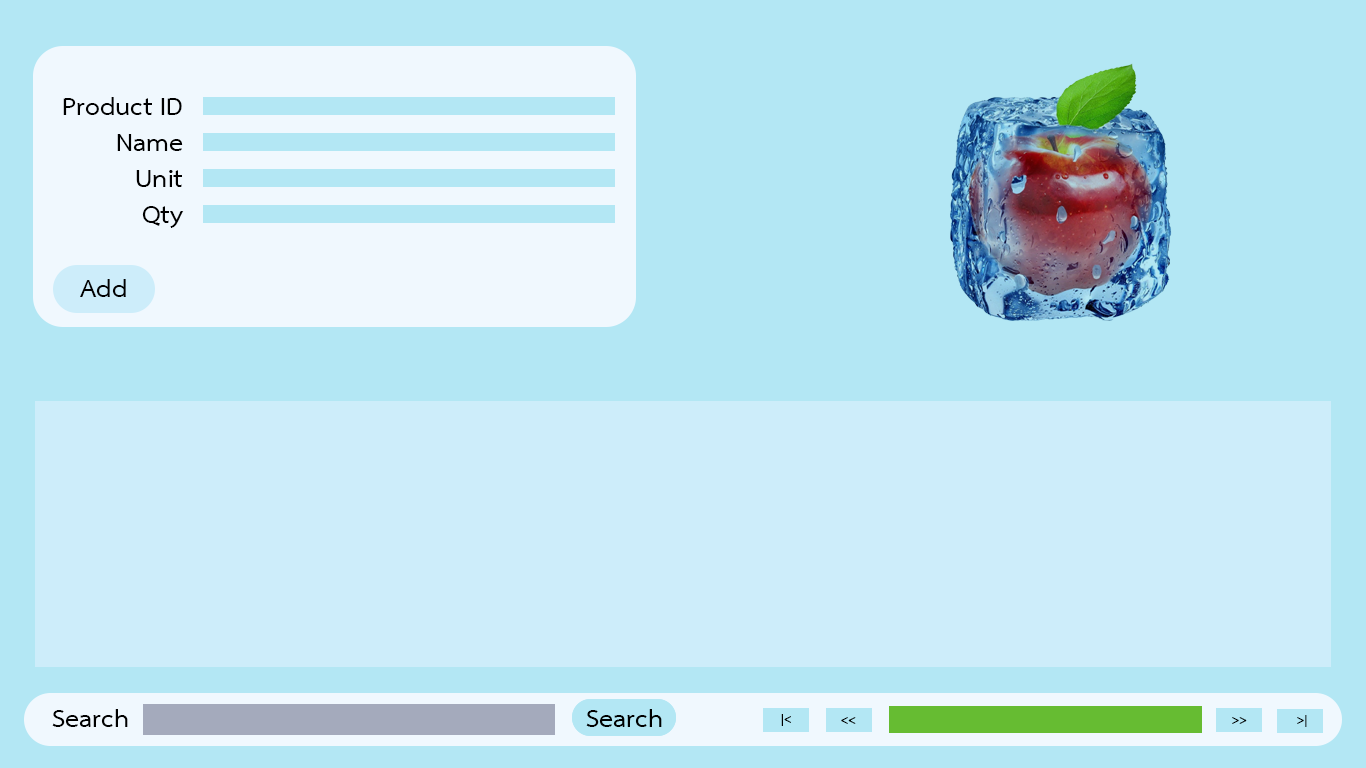
<style>
.page{position:relative;width:1366px;height:768px;background:#b3e7f4}
.page>*{position:absolute;margin:0}
.t1{font:36px/36px "THSarabunNew-Bold";color:#000000}
.t2{font:36px "THSarabunNew-Bold";color:#000000}
.t3{font:18px "THSarabunNew-Bold";color:#000000}
</style>
<div class="page">
<p class="t1" style="left:63px;top:97px;width:121px;height:131px;text-align:right">Product ID<br>Name<br>Unit<br>Qty</p>
<p class="t2" style="left:80px;top:279px;width:46px;height:18px">Add</p>
<p class="t2" style="left:52px;top:709px;width:76px;height:18px">Search</p>
<p class="t2" style="left:586px;top:709px;width:76px;height:18px">Search</p>
<p class="t3" style="left:781px;top:714px;width:10px;height:12px">|&lt;</p>
<p class="t3" style="left:841px;top:717px;width:15px;height:7px">&lt;&lt;</p>
<p class="t3" style="left:1232px;top:717px;width:15px;height:7px">&gt;&gt;</p>
<p class="t3" style="left:1297px;top:715px;width:10px;height:12px">&gt;|</p>
</div>
